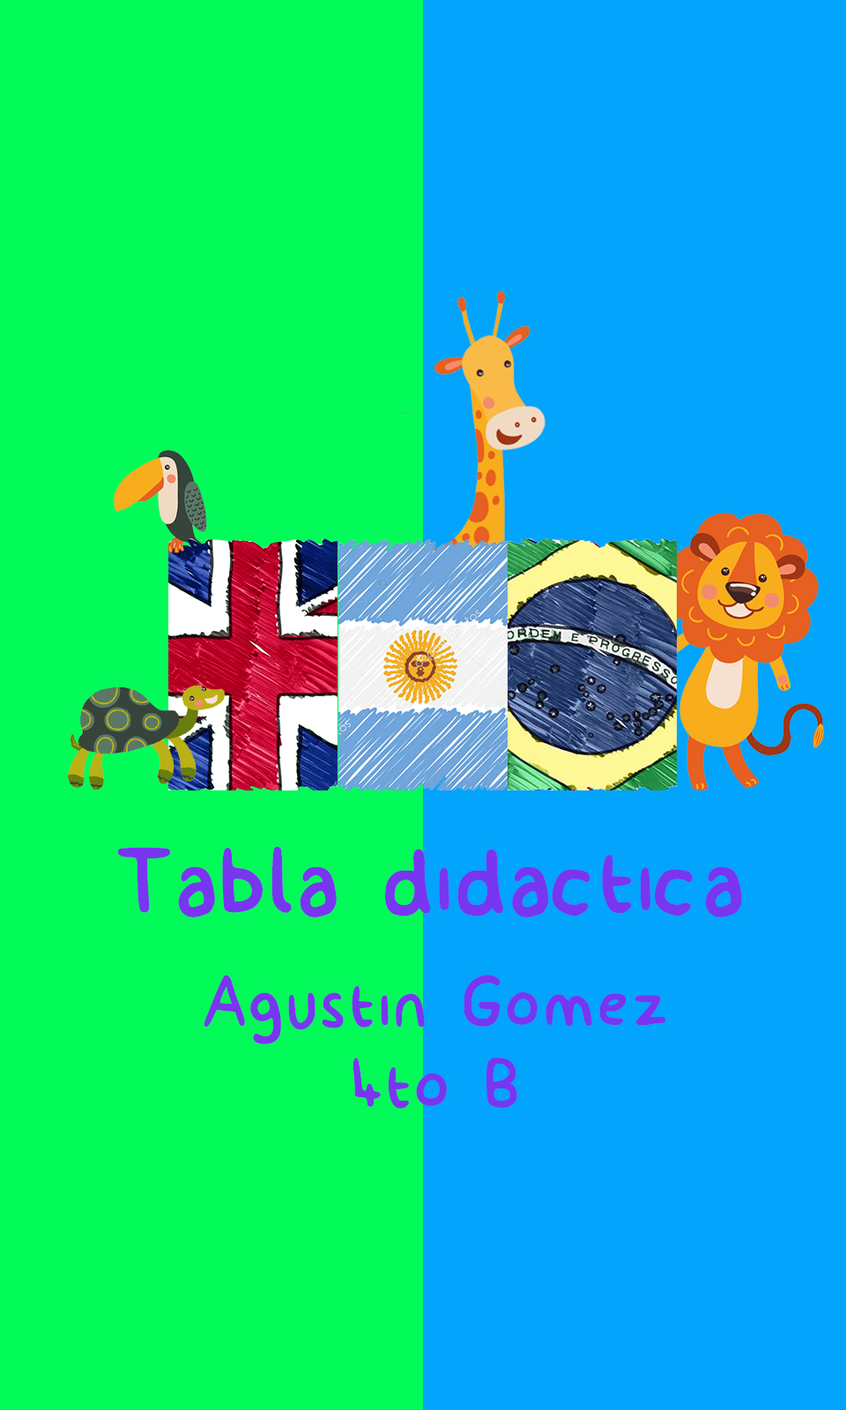
<style>
.page{position:relative;width:846px;height:1410px;background:#03fb5a}
.page>*{position:absolute;margin:0}
.t1{font:149.8px "billy";color:#7836f1}
.t2{font:105.7px/81.1px "billy";letter-spacing:0.02em;color:#7836f1}
</style>
<div class="page">
<p class="t1" style="left:117px;top:846px;width:625px;height:71px">Tabla didactica</p>
<p class="t2" style="left:204px;top:974px;width:461px;height:134px;text-align:center">Agustin Gomez<br>4to B</p>
</div>
